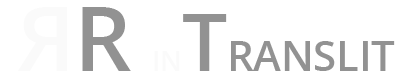
<style>
.page{position:relative;width:410px;height:75px;background:#ffffff}
.page>*{position:absolute;margin:0}
.t1{font:60px "OpenSans-Semibold";letter-spacing:-0.005em;color:#929292;font-variant:small-caps}
.t2{font:90px "OpenSans-Semibold";letter-spacing:-0.025em;color:#fafafa;text-transform:uppercase}
.t3{font:90px "OpenSans-Semibold";letter-spacing:-0.025em;color:#929292;text-transform:uppercase}
.t4{font:40px "OpenSans-Semibold";letter-spacing:-0.005em;color:#fafafa;font-variant:small-caps}
.t5{font:80px "OpenSans-Semibold";letter-spacing:-0.005em;color:#929292;font-variant:small-caps}
</style>
<div class="page">
<p class="t1" style="left:18px;top:7px;width:377px;height:64px"><span class="t2">Я</span><span class="t3">R </span><span class="t4">in</span><span class="t5">T</span>ranslit</p>
</div>
